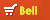
<style>
.page{position:relative;width:50px;height:20px}
.page>*{position:absolute;margin:0}
.t1{font:11.3px "CenturyGothic-Bold";color:#e4f70b;scale:0.93 1}
</style>
<div class="page">
<p class="t1" style="left:20px;top:6px;width:17px;height:9px">Beli</p>
<p class="t1" style="left:20px;top:6px;width:17px;height:9px">Beli</p>
</div>
